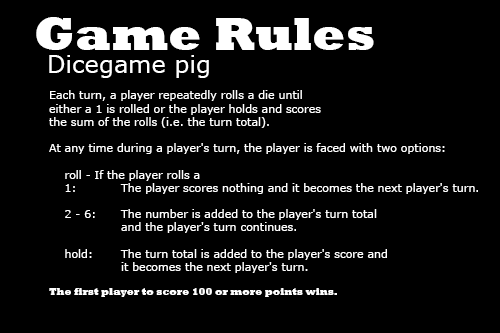
<style>
.page{position:relative;width:500px;height:333px;background:#000000}
.page>*{position:absolute;margin:0}
.t1{font:48px "Rockwell-ExtraBold";color:#ffffff}
.t2{font:24px "Verdana";color:#ffffff}
.t3{font:11px "Verdana";color:#ffffff}
.t4{font:10px "Rockwell-ExtraBold";color:#ffffff}
</style>
<div class="page">
<p class="t1" style="left:36px;top:17px;width:338px;height:33px">Game Rules</p>
<p class="t2" style="left:49px;top:55px;width:160px;height:23px">Dicegame pig</p>
<p class="t3" style="left:49px;top:90px;width:429px;height:207px">Each turn, a player repeatedly rolls a die until <br>either a 1 is rolled or the player holds and scores <br>the sum of the rolls (i.e. the turn total). <br><br>At any time during a player's turn, the player is faced with two options:<br><br>    roll - If the player rolls a<br>    1:   The player scores nothing and it becomes the next player's turn.<br><br>    2 - 6:  The number is added to the player's turn total <br>  and the player's turn continues.<br><br>    hold: The turn total is added to the player's score and <br>  it becomes the next player's turn.<br><span class="t4"><br>The first player to score 100 or more points wins.</span></p>
</div>
